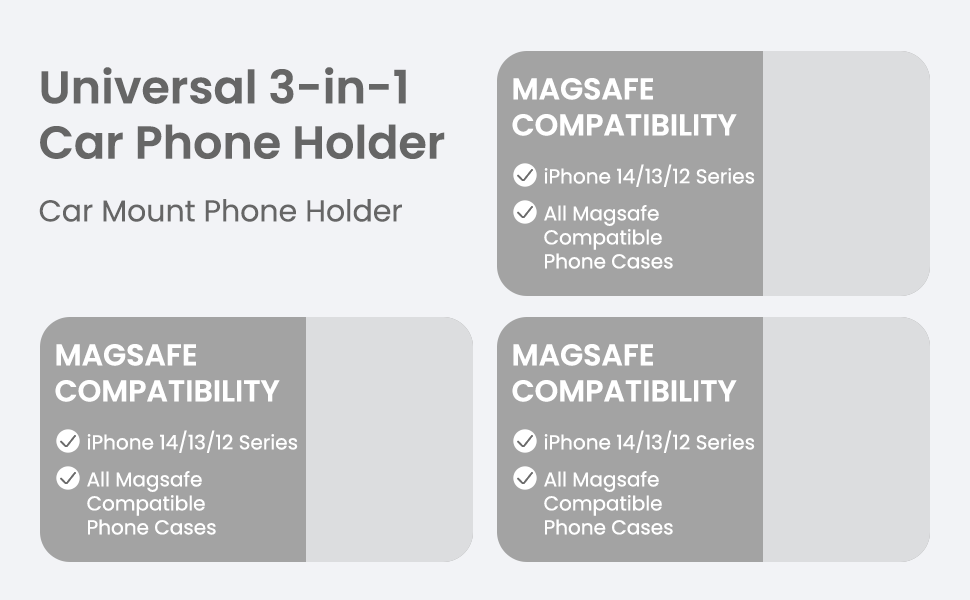
<style>
.page{position:relative;width:970px;height:600px;background:#f2f3f6}
.page>*{position:absolute;margin:0}
.t1{font:46px "Poppins-SemiBold";color:#666666}
.t2{font:30px "Poppins-SemiBold";color:#ffffff;text-transform:uppercase}
.t3{font:20px "Poppins-Regular";color:#ffffff}
.t4{font:30px "Poppins-Regular";color:#666666}
</style>
<div class="page">
<p class="t1" style="left:40px;top:67px;width:405px;height:92px">Universal 3-in-1<br>Car Phone Holder</p>
<p class="t2" style="left:512px;top:78px;width:225px;height:58px">MagSafe<br>Compatibility</p>
<p class="t3" style="left:544px;top:164px;width:211px;height:23px">iPhone 14/13/12 Series</p>
<p class="t4" style="left:39px;top:199px;width:363px;height:23px">Car Mount Phone Holder</p>
<p class="t3" style="left:544px;top:205px;width:129px;height:64px">All Magsafe<br>Compatible<br>Phone Cases</p>
<p class="t2" style="left:55px;top:344px;width:225px;height:58px">MagSafe<br>Compatibility</p>
<p class="t2" style="left:512px;top:344px;width:225px;height:58px">MagSafe<br>Compatibility</p>
<p class="t3" style="left:87px;top:430px;width:211px;height:23px">iPhone 14/13/12 Series</p>
<p class="t3" style="left:544px;top:430px;width:211px;height:23px">iPhone 14/13/12 Series</p>
<p class="t3" style="left:87px;top:471px;width:129px;height:64px">All Magsafe<br>Compatible<br>Phone Cases</p>
<p class="t3" style="left:544px;top:471px;width:129px;height:64px">All Magsafe<br>Compatible<br>Phone Cases</p>
</div>
